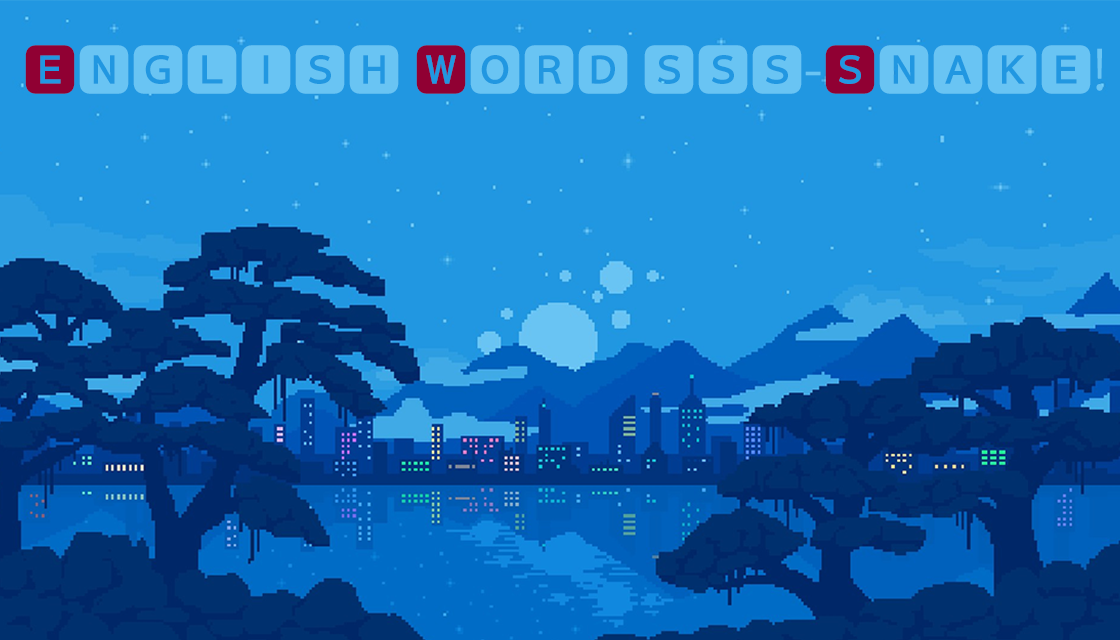
<style>
.page{position:relative;width:1120px;height:640px;background:#2197e1}
.page>*{position:absolute;margin:0}
.t1{font:54px "KozGoPr6N-Regular";color:#69c4f3}
.t2{font:54px "KozGoPr6N-Regular";color:#900033}
</style>
<div class="page">
<p class="t1" style="left:25px;top:45px;width:1078px;height:49px"><span class="t2">🅴</span>🅽🅶🅻🅸🆂🅷 <span class="t2">🆆</span>🅾🆁🅳 🆂🆂🆂-<span class="t2">🆂</span>🅽🅰🅺🅴!</p>
</div>
